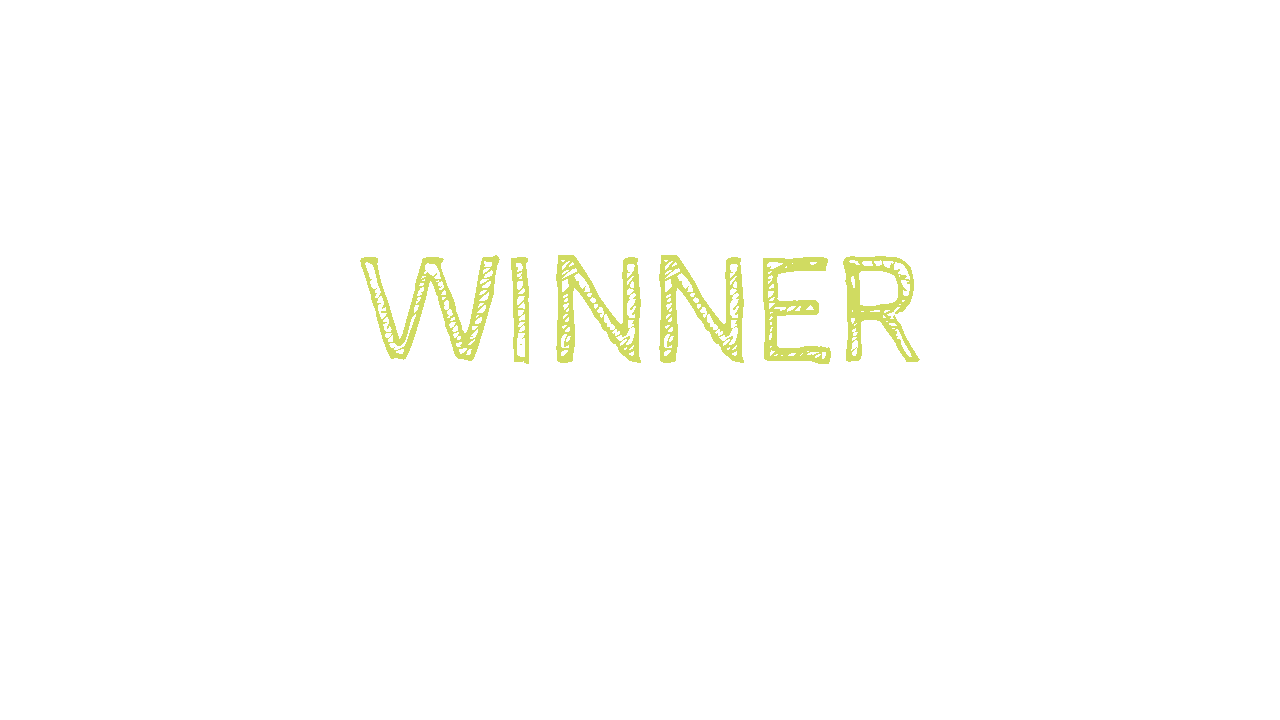
<style>
.page{position:relative;width:1280px;height:720px;background:#ffffff}
.page>*{position:absolute;margin:0}
.t1{font:156.3px "CabinSketch-Regular";color:#d0db61}
</style>
<div class="page">
<p class="t1" style="left:360px;top:255px;width:560px;height:109px">WINNER</p>
</div>
